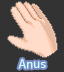
<style>
.page{position:relative;width:64px;height:72px;background:#333333}
.page>*{position:absolute;margin:0}
.t1{font:12px "JK-Gothic-M";color:#c9ffff}
</style>
<div class="page">
<p class="t1" style="left:18px;top:59px;width:28px;height:10px">Anus</p>
</div>
